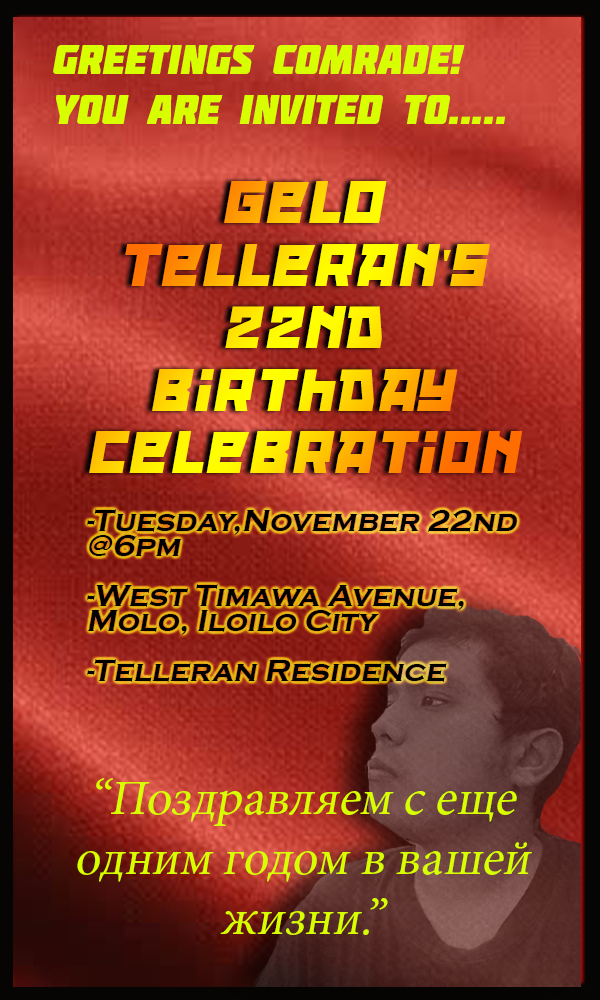
<style>
.page{position:relative;width:600px;height:1000px}
.page>*{position:absolute;margin:0}
.t1{font:41.7px "Molot";color:#d8ff00;font-style:italic}
.t2{font:52.1px "RedOctober-Fat";font-style:italic}
.t3{font:31.2px/25px "CopperplateGothic-Bold";color:#010100;font-style:italic}
.t4{font:50px "MinionPro-Regular";color:#d8ff00;font-style:italic}
</style>
<div class="page">
<p class="t1" style="left:53px;top:45px;width:453px;height:79px">Greetings comrade!<br>You are invited to.....</p>
<p class="t2" style="left:89px;top:181px;width:434px;height:292px;text-align:center">Gelo<br>Telleran's<br>22nd<br>Birthday<br>celebration</p>
<p class="t3" style="left:87px;top:509px;width:430px;height:173px">-Tuesday,November 22nd @6pm<br><br>-West Timawa Avenue, Molo, Iloilo City<br><br>-Telleran Residence</p>
<p class="t4" style="left:77px;top:778px;width:455px;height:157px;text-align:center">“Поздравляем с еще одним годом в вашей жизни.”</p>
</div>
